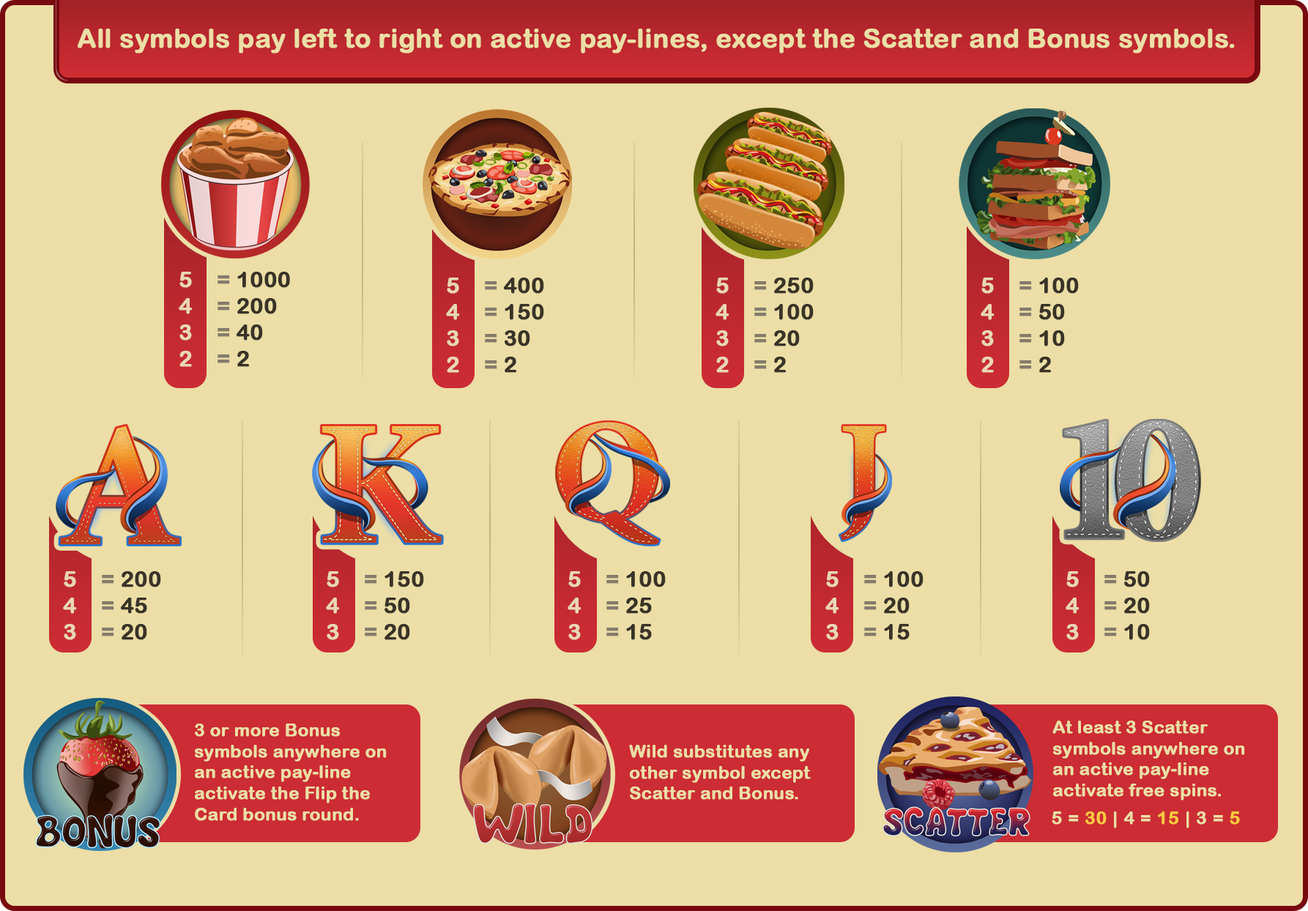
<style>
.page{position:relative;width:1308px;height:911px;background:#ecdea6}
.page>*{position:absolute;margin:0}
.t1{font:26.4px "ArialRoundedMTBold";color:#ecdea6;font-weight:bold}
.t2{font:22px "ArialRoundedMTBold";color:#3a3327;font-weight:bold}
.t3{font:22px "ArialRoundedMTBold";color:#e9d6b5;font-weight:bold}
.t4{font:22px "ArialRoundedMTBold";color:#847b6b;font-weight:bold}
.t5{font:17.6px "ArialRoundedMTBold";color:#ecdea6;font-weight:bold}
.t6{font:17.6px "ArialRoundedMTBold";letter-spacing:0.025em;color:#ecdea6;font-weight:bold}
.t7{font:17.6px "ArialRoundedMTBold";letter-spacing:0.025em;color:#ffcb3f;font-weight:bold}
</style>
<div class="page">
<p class="t1" style="left:78px;top:29px;width:1157px;height:24px">All symbols pay left to right on active pay-lines, except the Scatter and Bonus symbols.</p>
<p class="t2" style="left:179px;top:272px;width:111px;height:95px"><span class="t3">5</span><span class="t4">    =</span> 1000<br><span class="t3">4   </span><span class="t4"> = </span>200<br><span class="t3">3 </span><span class="t4">   = </span>40<br><span class="t3">2</span><span class="t4">    = </span>2</p>
<p class="t2" style="left:446px;top:278px;width:98px;height:95px"><span class="t3">5</span><span class="t4">    =</span> 400<br><span class="t3">4 </span><span class="t4">   =</span> 150<br><span class="t3">3 </span><span class="t4">   = </span>30<br><span class="t3">2</span><span class="t4">    = </span>2</p>
<p class="t2" style="left:716px;top:278px;width:98px;height:95px"><span class="t3">5</span><span class="t4">    =</span> 250<br><span class="t3">4</span><span class="t4">    =</span> 100<br><span class="t3">3 </span><span class="t4">   = </span>20<br><span class="t3">2</span><span class="t4">    = </span>2</p>
<p class="t2" style="left:981px;top:278px;width:98px;height:95px"><span class="t3">5</span><span class="t4">    =</span> 100<br><span class="t3">4 </span><span class="t4">   =</span> 50<br><span class="t3">3 </span><span class="t4">   = </span>10<br><span class="t3">2</span><span class="t4">    = </span>2</p>
<p class="t2" style="left:63px;top:571px;width:98px;height:69px"><span class="t3">5</span><span class="t4">    =</span> 200<br><span class="t3">4   </span><span class="t4"> = </span>45<br><span class="t3">3 </span><span class="t4">   = </span>20</p>
<p class="t2" style="left:326px;top:571px;width:98px;height:69px"><span class="t3">5</span><span class="t4">    =</span> 150<br><span class="t3">4 </span><span class="t4">   =</span> 50<br><span class="t3">3 </span><span class="t4">   = </span>20</p>
<p class="t2" style="left:568px;top:571px;width:98px;height:69px"><span class="t3">5</span><span class="t4">    =</span> 100<br><span class="t3">4</span><span class="t4">    =</span> 25<br><span class="t3">3 </span><span class="t4">   = </span>15</p>
<p class="t2" style="left:826px;top:571px;width:98px;height:69px"><span class="t3">5</span><span class="t4">    =</span> 100<br><span class="t3">4 </span><span class="t4">   =</span> 20<br><span class="t3">3 </span><span class="t4">   = </span>15</p>
<p class="t2" style="left:1066px;top:571px;width:84px;height:69px"><span class="t3">5</span><span class="t4">    =</span> 50<br><span class="t3">4 </span><span class="t4">   =</span> 20<br><span class="t3">3 </span><span class="t4">   = </span>10</p>
<p class="t5" style="left:195px;top:724px;width:192px;height:97px">3 or more Bonus symbols anywhere on an active pay-line activate the Flip the Card bonus round.</p>
<p class="t5" style="left:1053px;top:721px;width:192px;height:80px">At least 3 Scatter symbols anywhere on an active pay-line activate free spins.</p>
<p class="t5" style="left:629px;top:745px;width:182px;height:55px">Wild substitutes any other symbol except Scatter and Bonus.</p>
<p class="t6" style="left:1052px;top:812px;width:188px;height:17px">5 = <span class="t7">30</span> | 4 = <span class="t7">15</span> | 3 = <span class="t7">5</span></p>
</div>
